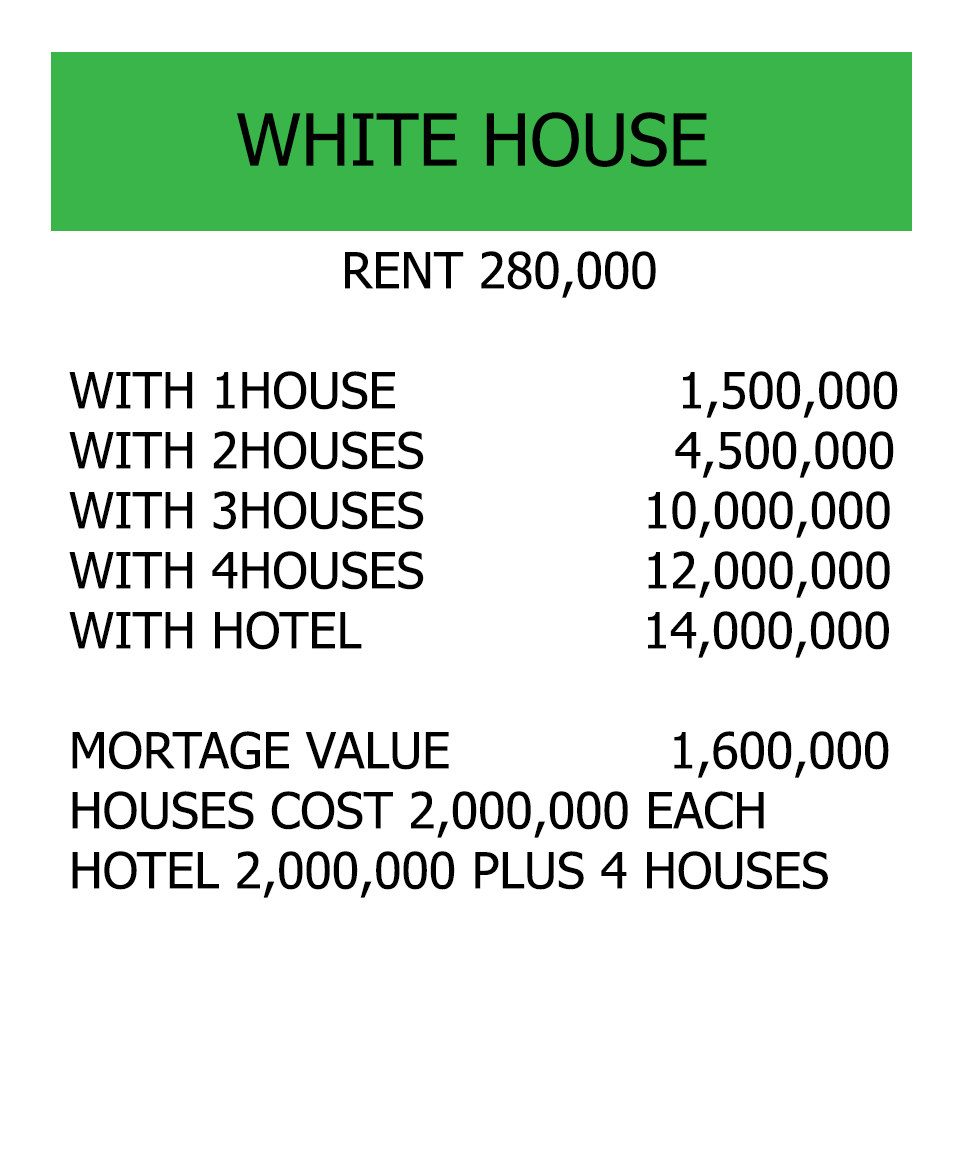
<style>
.page{position:relative;width:966px;height:1164px;background:#ffffff}
.page>*{position:absolute;margin:0}
.t1{font:72px "Tahoma";color:#000000}
.t2{font:50px "Tahoma";color:#010000}
</style>
<div class="page">
<p class="t1" style="left:237px;top:112px;width:470px;height:55px">WHITE HOUSE</p>
<p class="t2" style="left:69px;top:251px;width:829px;height:647px;text-align:center">RENT 280,000<br><br>WITH 1HOUSE                  1,500,000<br>WITH 2HOUSES                4,500,000<br>WITH 3HOUSES              10,000,000<br>WITH 4HOUSES              12,000,000<br>WITH HOTEL                  14,000,000<br><br>MORTAGE VALUE              1,600,000<br>HOUSES COST 2,000,000 EACH<br>HOTEL 2,000,000 PLUS 4 HOUSES</p>
</div>
